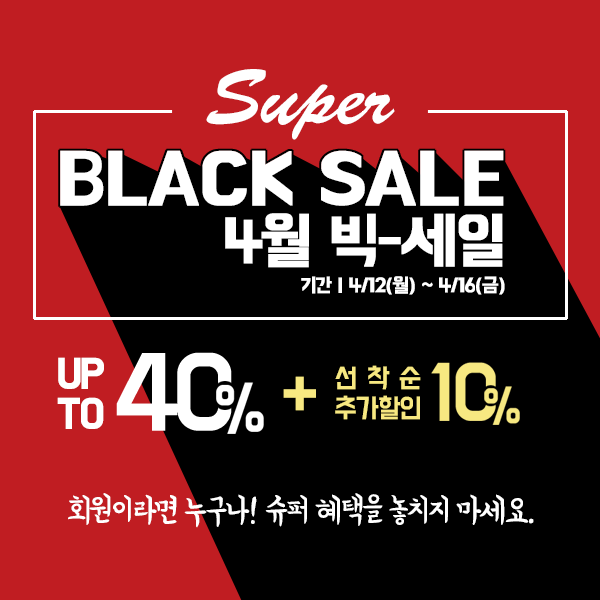
<style>
.page{position:relative;width:600px;height:600px;background:#000000}
.page>*{position:absolute;margin:0}
.t1{font:78.8px "BrushScriptStd";color:#ffffff}
.t2{font:20px/32px "BMHANNAPro";letter-spacing:-0.06em;color:#ffffff;font-weight:bold}
.t3{font:74px "BMHANNAPro";letter-spacing:-0.02em;color:#ffffff;font-weight:bold}
.t4{font:62px/58px "BMHANNAPro";letter-spacing:-0.06em;color:#ffffff;font-weight:bold}
.t5{font:36px "BMDoHyeon";letter-spacing:-0.06em;color:#ffffff;text-transform:uppercase;font-weight:bold}
.t6{font:36px/40px "BMDoHyeon";letter-spacing:-0.06em;color:#ffffff;text-transform:uppercase;font-weight:bold}
.t7{font:24px/30px "BMDoHyeon";letter-spacing:-0.06em;color:#f7e881;text-transform:uppercase}
.t8{font:24px "BMDoHyeon";letter-spacing:0.38em;color:#f7e881;text-transform:uppercase}
.t9{font:68px "BMDoHyeon";letter-spacing:-0.06em;color:#f7e881;scale:0.97 1}
.t10{font:34px "BMYEONSUNG";letter-spacing:-0.06em;color:#ffffff}
</style>
<div class="page">
<p class="t1" style="left:206px;top:69px;width:189px;height:71px">Super</p>
<p class="t2" style="left:60px;top:150px;width:445px;height:145px;text-align:right"><span class="t3">BLACK SALE<br></span><span class="t4">4월 빅-세일<br></span>기간 | 4/12(월) ~ 4/16(금)</p>
<p class="t5" style="left:57px;top:357px;width:47px;height:72px;text-align:center">up<br><span class="t6">to</span></p>
<p class="t7" style="left:335px;top:365px;width:86px;height:55px;text-align:center"><span class="t8">선착순<br></span>추가할인</p>
<p class="t9" style="left:283px;top:376px;width:33px;height:35px">+</p>
<p class="t10" style="left:68px;top:493px;width:466px;height:35px">회원이라면 누구나! 슈퍼 혜택을 놓치지 마세요.</p>
</div>
